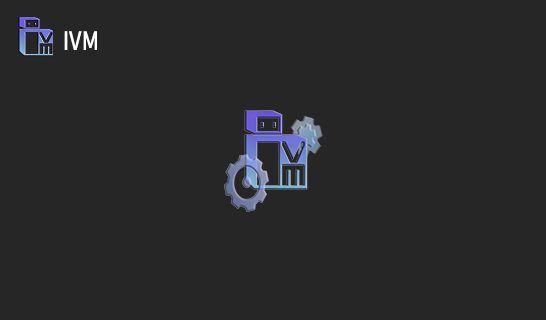
<style>
.page{position:relative;width:546px;height:320px;background:#262626}
.page>*{position:absolute;margin:0}
.t1{font:25px "SourceHanSansSC-Normal";color:#ffffff;font-weight:bold;scale:0.84 1}
</style>
<div class="page">
<p class="t1" style="left:64px;top:31px;width:33px;height:19px">IVM</p>
</div>
